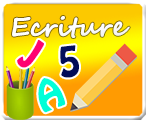
<style>
.page{position:relative;width:146px;height:120px}
.page>*{position:absolute;margin:0}
.t1{font:26px "SegoeScript-Bold";color:#ffffff}
.t2{font:38px "HoboStd";color:#ff0070}
.t3{font:37.8px "HoboStd";color:#000b58}
.t4{font:38px "HoboStd";color:#00ffd8}
</style>
<div class="page">
<p class="t1" style="left:12px;top:16px;width:118px;height:22px">Ecriture</p>
<p class="t2" style="left:17px;top:39px;width:27px;height:29px;rotate:36deg">J</p>
<p class="t3" style="left:60px;top:45px;width:19px;height:33px;rotate:-6deg">5</p>
<p class="t4" style="left:38px;top:78px;width:28px;height:35px;rotate:-22deg">A</p>
</div>
